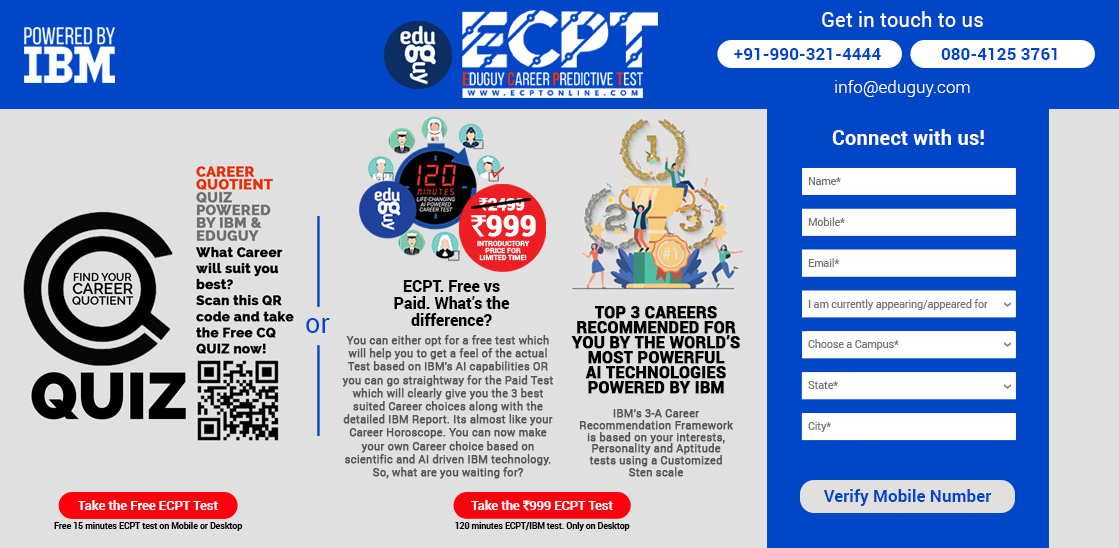
<style>
.page{position:relative;width:1119px;height:548px;background:#e0e0e0}
.page>*{position:absolute;margin:0}
.t1{font:20.6px "Roboto-Regular";color:#ffffff}
.t2{font:17.3px "Roboto-Bold";color:#0146c7}
.t3{font:17.3px "Roboto-Light";color:#ffffff}
.t4{font:20.6px "Roboto-Bold";color:#ffffff}
.t5{font:10.6px "Roboto-Regular";color:#737373}
.t6{font:16.9px "Roboto-Bold";letter-spacing:-0.06em;color:#ffffff;text-transform:uppercase;font-weight:bold}
.t7{font:16.9px "RupeeForadian";letter-spacing:-0.02em;color:#ffffff;text-transform:uppercase;font-weight:bold}
.t8{font:29px "Roboto-Bold";letter-spacing:-0.02em;color:#ffffff;text-transform:uppercase;font-weight:bold}
.t9{font:29px "RupeeForadian";letter-spacing:-0.02em;color:#ffffff;text-transform:uppercase;font-weight:bold}
.t10{font:7.1px/7.1px "Roboto-Bold";color:#ffffff;text-transform:uppercase}
.t11{font:15.9px/17.3px "Roboto-Black";color:#000000}
.t12{font:27.1px "Roboto-Regular";color:#0146c7}
.t13{font:15.9px/15px "Roboto-Black";color:#000000;text-transform:uppercase;font-weight:bold}
.t14{font:11px "Roboto-Regular";color:#555757;font-weight:bold}
.t15{font:11px/11.9px "Roboto-Regular";color:#555757;font-weight:bold}
.t16{font:12.8px "Roboto-Bold";color:#ffffff}
.t17{font:12.7px "Roboto-Bold";color:#ffffff}
.t18{font:12.7px "RupeeForadian";letter-spacing:-0.02em;color:#ffffff;text-transform:uppercase;font-weight:bold}
.t19{font:8.6px "Roboto-Bold";color:#000000}
.t20{font:8.5px "Roboto-Bold";color:#000000}
</style>
<div class="page">
<p class="t1" style="left:822px;top:11px;width:161px;height:16px">Get in touch to us</p>
<p class="t2" style="left:734px;top:48px;width:147px;height:12px">+91-990-321-4444</p>
<p class="t2" style="left:941px;top:48px;width:116px;height:12px">080-4125 3761</p>
<p class="t3" style="left:835px;top:80px;width:135px;height:17px">info@eduguy.com</p>
<p class="t4" style="left:832px;top:129px;width:152px;height:16px">Connect with us!</p>
<p class="t5" style="left:808px;top:177px;width:33px;height:8px">Name*</p>
<p class="t6" style="left:479px;top:197px;width:46px;height:14px"><span class="t7">`</span>2499</p>
<p class="t8" style="left:471px;top:215px;width:65px;height:22px"><span class="t9">`</span>999</p>
<p class="t5" style="left:808px;top:217px;width:37px;height:9px">Mobile*</p>
<p class="t10" style="left:477px;top:240px;width:53px;height:21px;text-align:center">introductory<br>price for<br>limited time!</p>
<p class="t5" style="left:808px;top:258px;width:32px;height:9px">Email*</p>
<p class="t11" style="left:394px;top:280px;width:116px;height:46px;text-align:center">ECPT. Free vs <br>Paid. What’s the difference?</p>
<p class="t5" style="left:808px;top:299px;width:180px;height:11px">I am currently appearing/appeared for</p>
<p class="t12" style="left:306px;top:318px;width:24px;height:15px">or</p>
<p class="t13" style="left:571px;top:306px;width:169px;height:88px;text-align:center">Top 3 careers<br>recommended for<br>you by the world’s<br>most powerful<br>ai technologies<br>powered by ibm</p>
<p class="t14" style="left:342px;top:335px;width:211px;height:144px;text-align:center">You can either opt for a free test which will help you to get a feel of the actual Test based on IBM's AI capabilities OR you can go straightway for the Paid Test which will clearly give you the 3 best suited Career choices along with the detailed IBM Report. Its almost like your Career Horoscope. You can now make your own Career choice based on scientific and AI driven IBM technology. So, what are you waiting for?</p>
<p class="t5" style="left:808px;top:339px;width:91px;height:11px">Choose a Campus*</p>
<p class="t5" style="left:808px;top:381px;width:30px;height:8px">State*</p>
<p class="t15" style="left:579px;top:409px;width:154px;height:68px;text-align:center">IBM’s 3-A Career Recommendation Framework is based on your interests, Personality and Aptitude <br>tests using a Customized Sten scale</p>
<p class="t5" style="left:808px;top:422px;width:23px;height:10px">City*</p>
<p class="t2" style="left:823px;top:489px;width:169px;height:17px">Verify Mobile Number</p>
<p class="t16" style="left:78px;top:500px;width:140px;height:10px">Take the Free ECPT Test</p>
<p class="t17" style="left:471px;top:500px;width:142px;height:11px">Take the <span class="t18">`</span>999 ECPT Test</p>
<p class="t19" style="left:54px;top:522px;width:189px;height:9px">Free 15 minutes ECPT test on Mobile or Desktop</p>
<p class="t20" style="left:455px;top:522px;width:175px;height:9px">120 minutes ECPT/IBM test. Only on Desktop</p>
</div>
